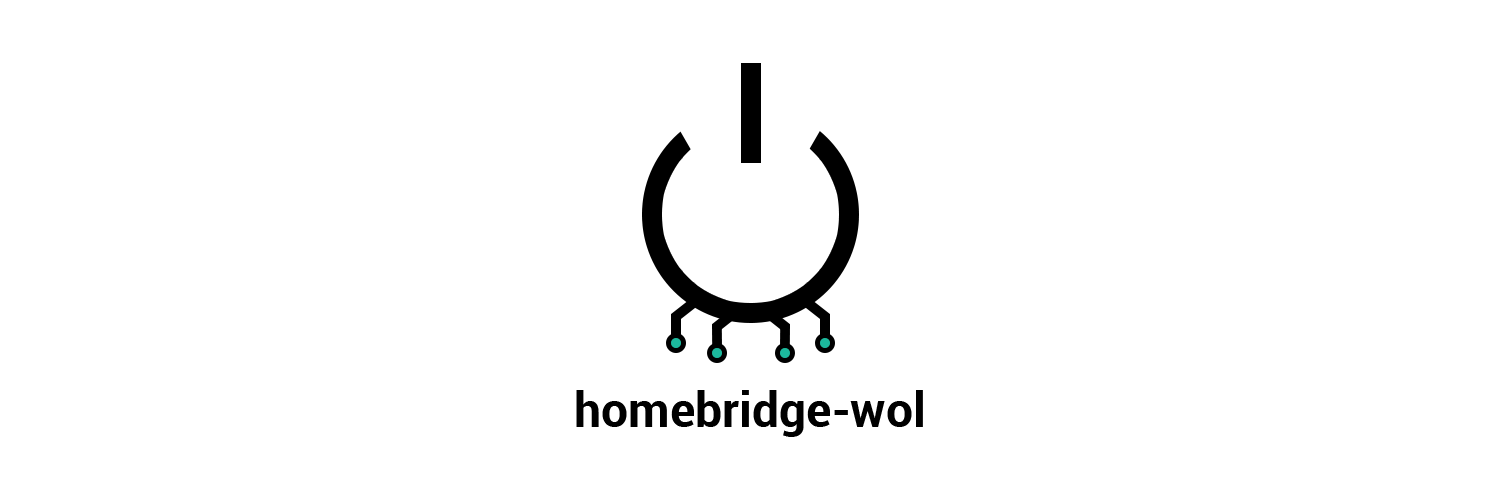
<style>
.page{position:relative;width:1500px;height:500px;background:#ffffff}
.page>*{position:absolute;margin:0}
.t1{font:48px "Roboto-Bold";color:#000000}
</style>
<div class="page">
<p class="t1" style="left:576px;top:390px;width:347px;height:47px">homebridge-wol</p>
</div>
